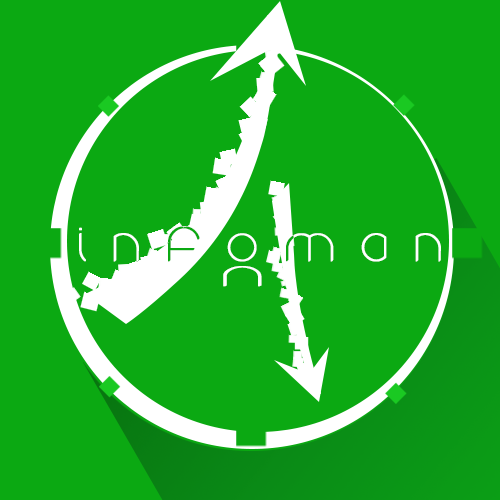
<style>
.page{position:relative;width:500px;height:500px;background:#0ba912}
.page>*{position:absolute;margin:0}
.t1{font:38.6px "round";letter-spacing:0.7em;color:#ffffff;font-weight:bold}
.t2{font:27.6px "round";letter-spacing:0.7em;color:#ffffff;font-weight:bold;scale:1.84 1}
</style>
<div class="page">
<p class="t1" style="left:79px;top:226px;width:362px;height:36px">infoman</p>
<p class="t1" style="left:79px;top:226px;width:362px;height:36px">infoman</p>
<p class="t2" style="left:223px;top:266px;width:39px;height:21px;rotate:180deg">u</p>
</div>
